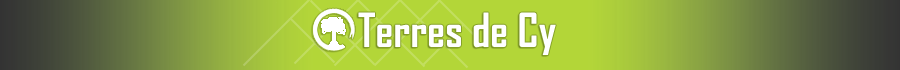
<style>
.page{position:relative;width:900px;height:70px}
.page>*{position:absolute;margin:0}
.t1{font:45px "AgencyFB-Bold";color:#ffffff}
</style>
<div class="page">
<p class="t1" style="left:358px;top:12px;width:198px;height:43px">Terres de Cy</p>
</div>
